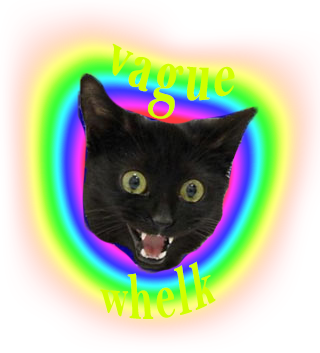
<style>
.page{position:relative;width:320px;height:353px}
.page>*{position:absolute;margin:0}
.t1{font:46px "BellMTBold";letter-spacing:0.05em;color:#d1fe00}
.t2{font:39px "BellMTBold";letter-spacing:0.05em;color:#d1fe00}
</style>
<div class="page">
<p class="t1" style="left:112px;top:43px;width:123px;height:76px;rotate:11deg">vague</p>
<p class="t2" style="left:100px;top:261px;width:116px;height:58px;rotate:-5deg">whelk</p>
</div>
